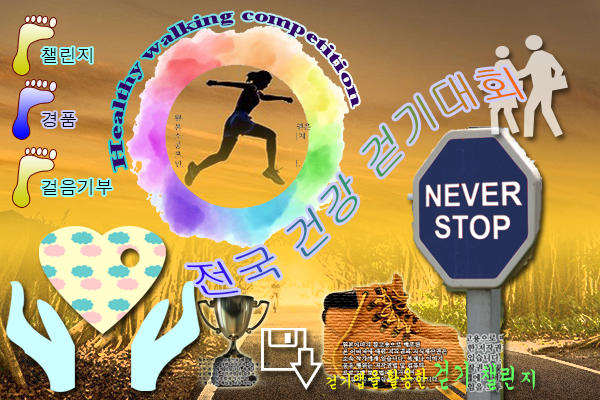
<style>
.page{position:relative;width:600px;height:400px}
.page>*{position:absolute;margin:0}
.t1{font:18px "TimesNewRomanPS-BoldMT";color:#330066}
.t2{font:18px "Dotum";color:#000000}
.t3{font:14px "Gungsuh";color:#ffff00}
.t4{font:20px "Gungsuh";color:#66ff66}
</style>
<div class="page">
<p class="t1" style="left:109px;top:12px;width:250px;height:160px;rotate:-15deg">Healthy walking competition</p>
<p class="t2" style="left:41px;top:47px;width:51px;height:16px">챌린지</p>
<p class="t2" style="left:42px;top:112px;width:34px;height:15px">경품</p>
<p class="t2" style="left:41px;top:179px;width:71px;height:16px">걸음기부</p>
<p class="t3" style="left:325px;top:359px;width:210px;height:32px">걷기앱을 활용한 <span class="t4">걷기 챌린지</span></p>
</div>
